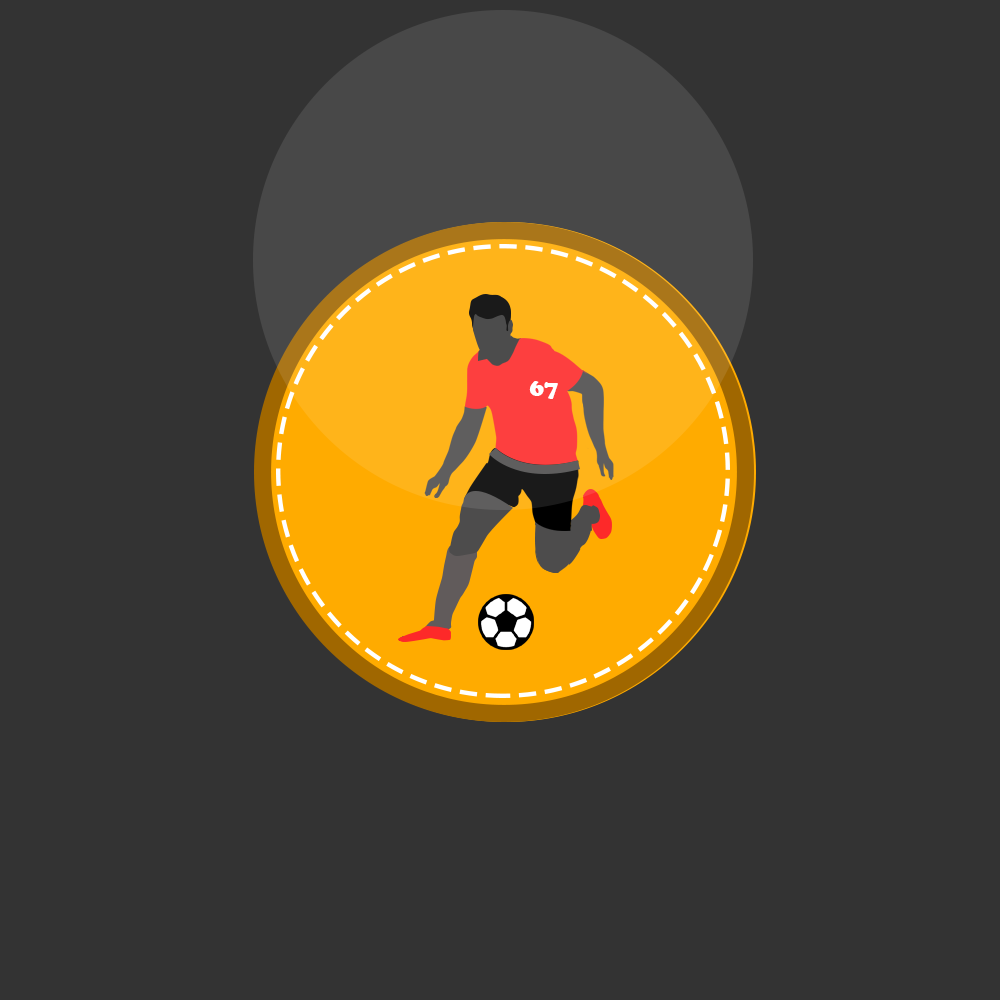
<style>
.page{position:relative;width:1000px;height:1000px;background:#333333}
.page>*{position:absolute;margin:0}
.t1{font:24px "CooperBlack";color:#ffffff}
</style>
<div class="page">
<p class="t1" style="left:529px;top:381px;width:29px;height:18px">67</p>
</div>
